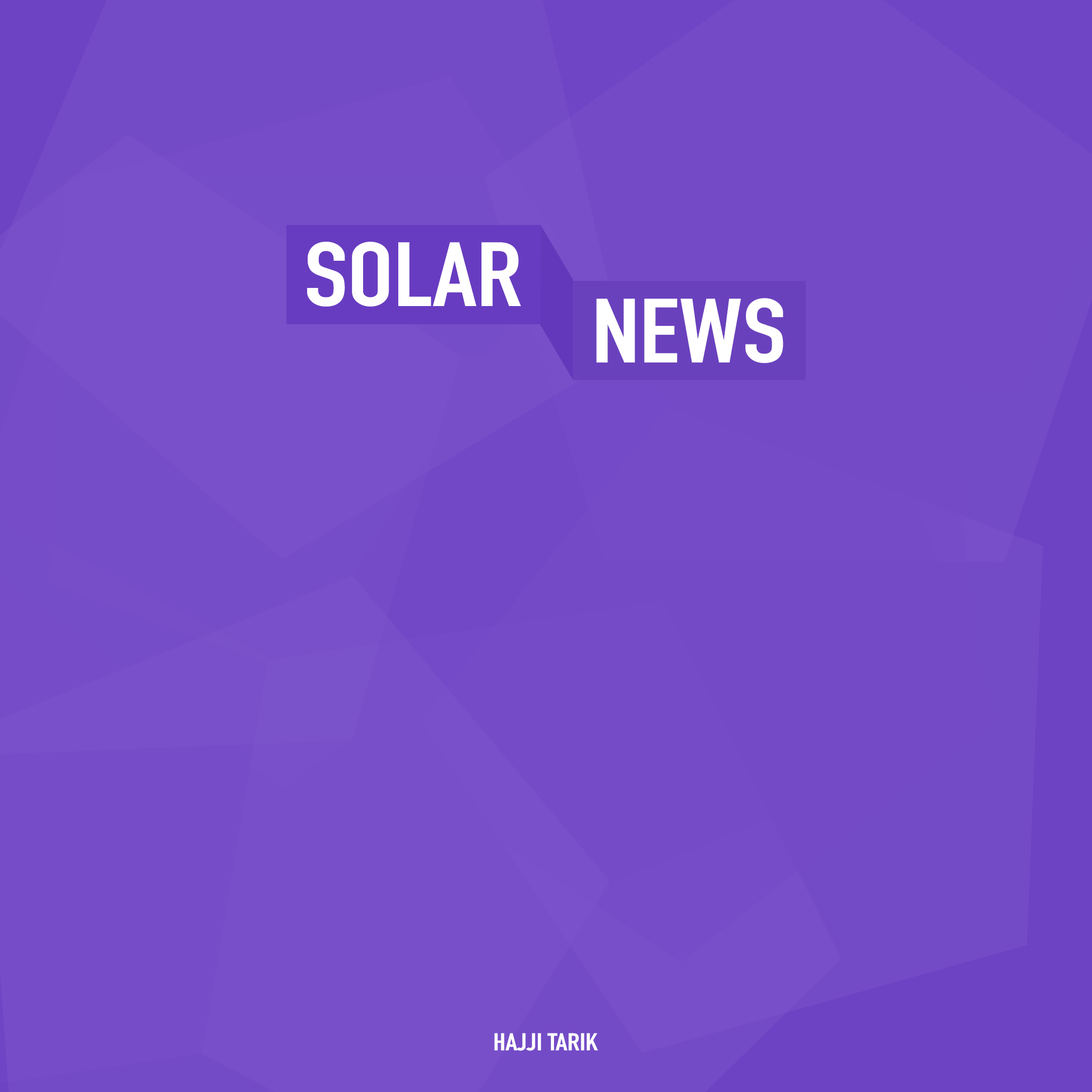
<style>
.page{position:relative;width:1092px;height:1092px}
.page>*{position:absolute;margin:0}
.t1{font:89.3px "DINCondensed-Bold";color:#ffffff;scale:1.2 1}
.t2{font:24px "DINCondensed-Bold";color:#ffffff;scale:1.2 1}
</style>
<div class="page">
<p class="t1" style="left:307px;top:242px;width:214px;height:65px">SOLAR</p>
<p class="t1" style="left:596px;top:298px;width:187px;height:65px">NEWS</p>
<p class="t2" style="left:494px;top:1033px;width:104px;height:18px">HAJJI TARIK</p>
</div>
